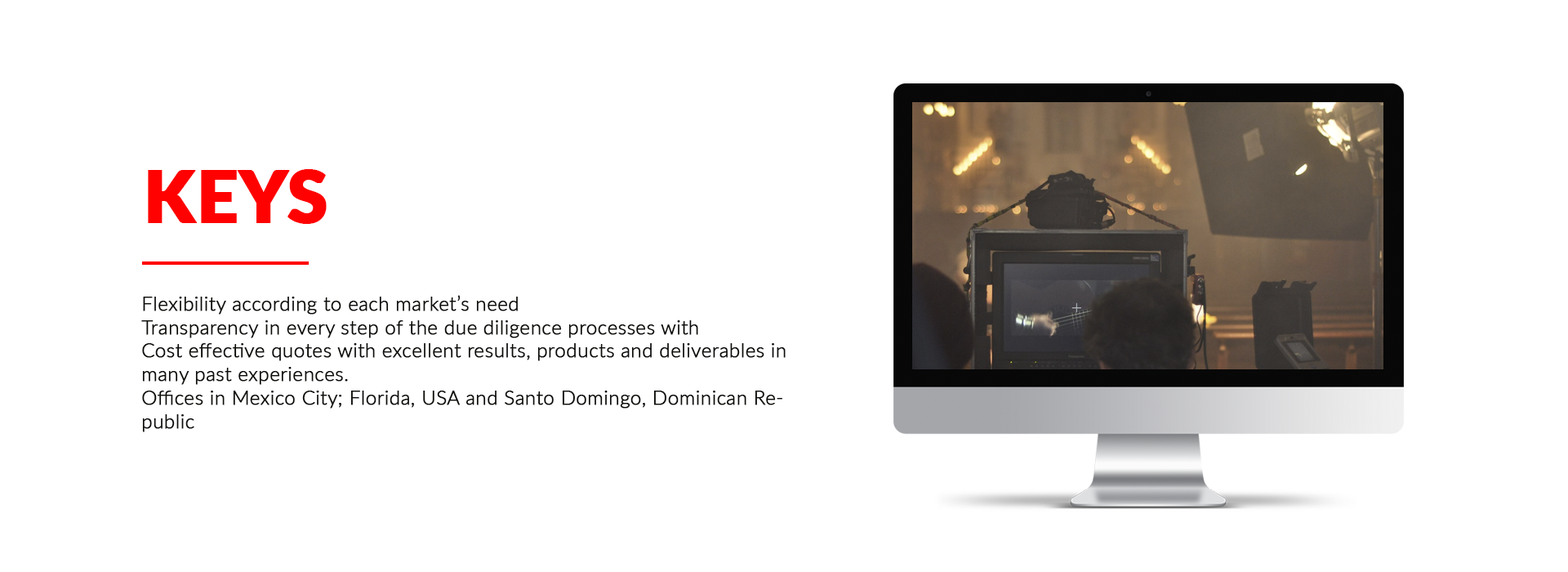
<style>
.page{position:relative;width:1568px;height:572px;background:#ffffff}
.page>*{position:absolute;margin:0}
.t1{font:72px "Lato-Black";color:#ff0100;font-weight:bold}
.t2{font:19.6px "Lato-Light";color:#0b0c07;font-weight:bold}
</style>
<div class="page">
<p class="t1" style="left:148px;top:169px;width:179px;height:55px">KEYS</p>
<p class="t2" style="left:141px;top:295px;width:645px;height:137px">Flexibility according to each market’s need<br>Transparency in every step of the due diligence processes with<br>Cost effective quotes with excellent results, products and deliverables in many past experiences.<br>Offices in Mexico City; Florida, USA and Santo Domingo, Dominican Republic</p>
</div>
